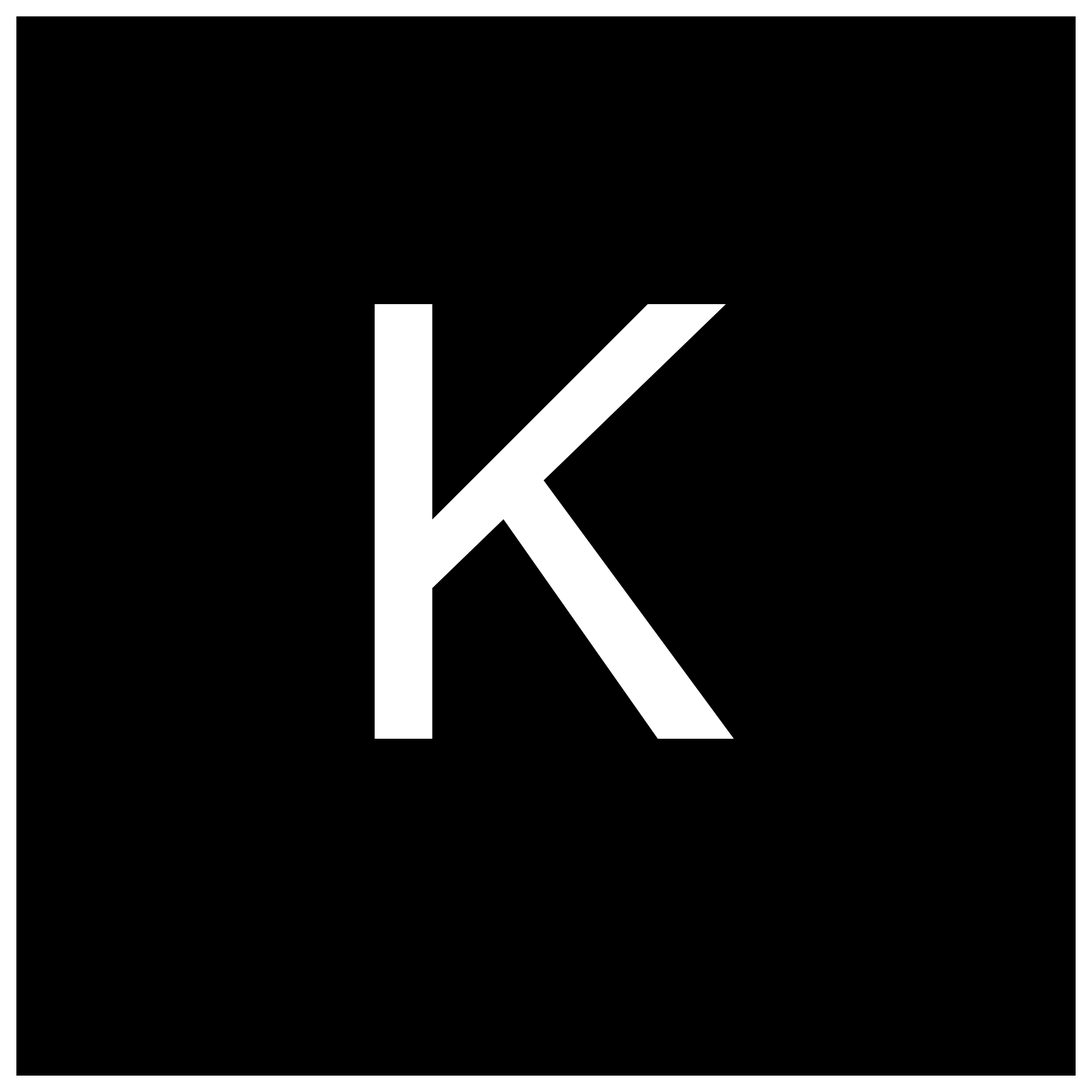
<style>
.page{position:relative;width:1092px;height:1092px;background:#000000}
.page>*{position:absolute;margin:0}
.t1{font:606.7px "ArialMT";color:#ffffff}
</style>
<div class="page">
<p class="t1" style="left:375px;top:304px;width:359px;height:435px">K</p>
</div>
